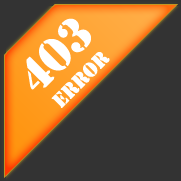
<style>
.page{position:relative;width:181px;height:181px;background:#333333}
.page>*{position:absolute;margin:0}
.t1{font:44px "StencilStd";color:#ffffff}
.t2{font:19px "StencilStd";color:#ffffff}
</style>
<div class="page">
<p class="t1" style="left:26px;top:18px;width:65px;height:72px;rotate:-45deg">403</p>
<p class="t2" style="left:51px;top:52px;width:59px;height:56px;rotate:-45deg">ERROR</p>
</div>
